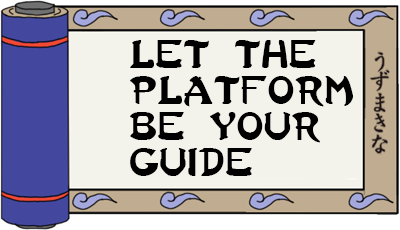
<style>
.page{position:relative;width:400px;height:230px;background:#f3f2eb}
.page>*{position:absolute;margin:0}
.t1{font:30px "LastNinja";color:#000000}
</style>
<div class="page">
<p class="t1" style="left:130px;top:40px;width:224px;height:136px">Let the <br>platform<br>be your<br>guide</p>
</div>
